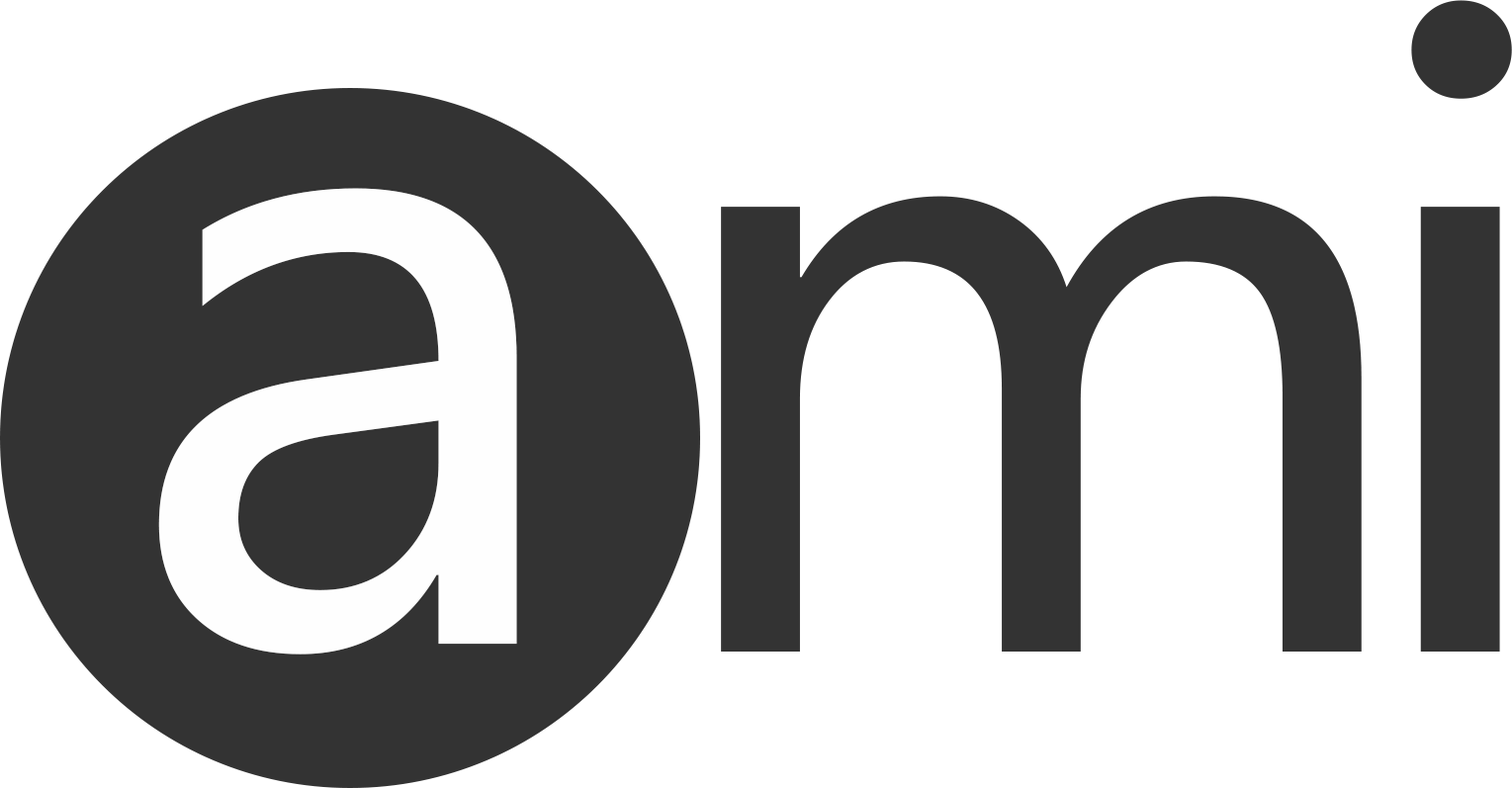
<style>
.page{position:relative;width:1512px;height:788px;background:#ffffff}
.page>*{position:absolute;margin:0}
.t1{font:824.3px "MicrosoftYaHei";color:#333333}
.t2{font:824.3px "MicrosoftYaHei";color:#fefefe}
</style>
<div class="page">
<p class="t1" style="left:1412px;top:0px;width:100px;height:652px">i</p>
<p class="t2" style="left:158px;top:188px;width:359px;height:467px">a</p>
<p class="t1" style="left:721px;top:196px;width:641px;height:456px">m</p>
</div>
